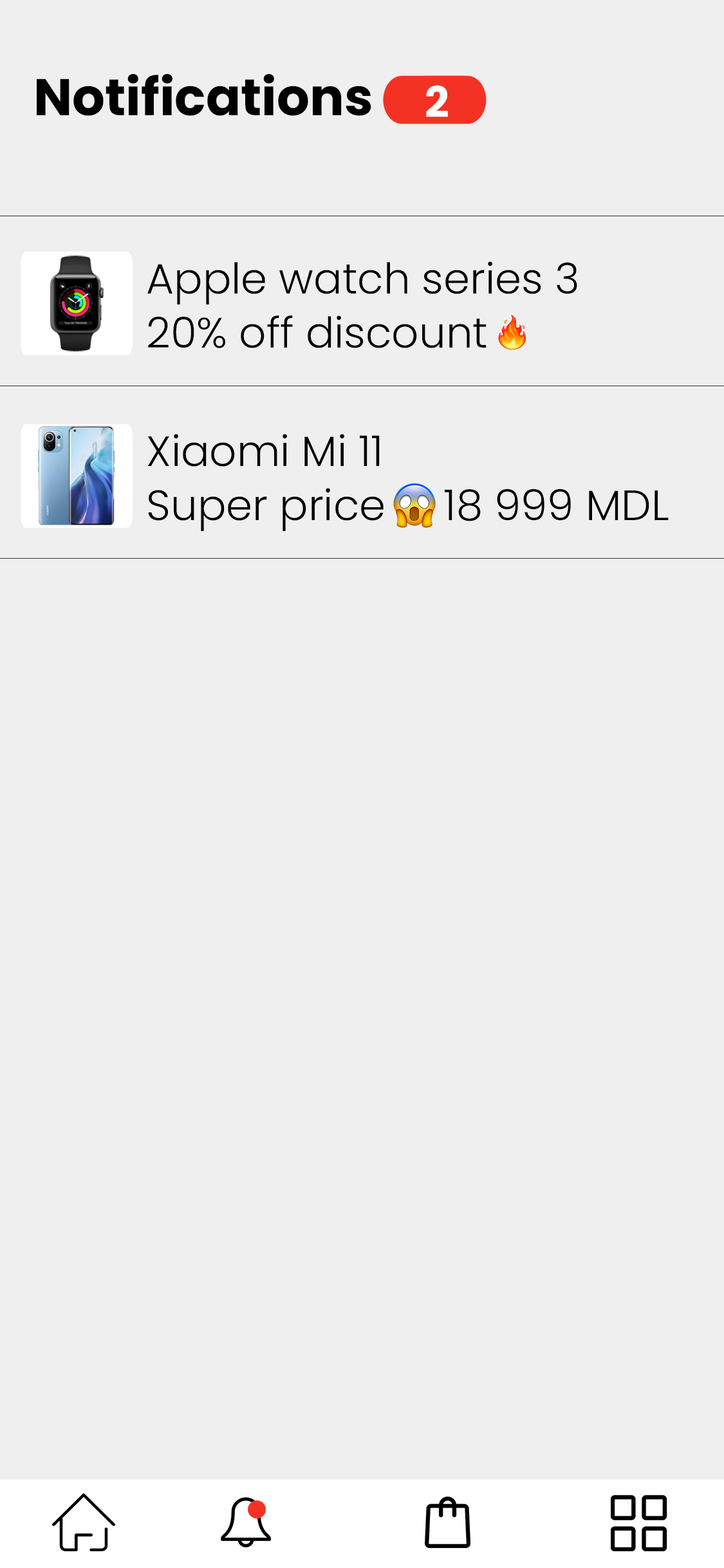
<style>
.page{position:relative;width:724px;height:1568px;background:#efefef}
.page>*{position:absolute;margin:0}
.t1{font:51.5px "Poppins-Bold";color:#000000}
.t2{font:42.5px "Poppins-Bold";color:#ffffff}
.t3{font:42.5px "Poppins-Light";color:#000000}
</style>
<div class="page">
<p class="t1" style="left:37px;top:74px;width:334px;height:42px">Notifications</p>
<p class="t2" style="left:426px;top:85px;width:22px;height:32px">2</p>
<p class="t3" style="left:147px;top:261px;width:430px;height:43px">Apple watch series 3</p>
<p class="t3" style="left:148px;top:315px;width:339px;height:33px">20% off discount</p>
<p class="t3" style="left:147px;top:434px;width:233px;height:33px">Xiaomi Mi 11</p>
<p class="t3" style="left:148px;top:488px;width:521px;height:43px">Super price     18 999 MDL</p>
</div>
